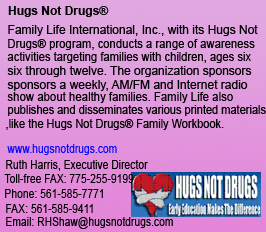
<style>
.page{position:relative;width:266px;height:232px}
.page>*{position:absolute;margin:0}
.t1{font:12px "Arial-BoldMT";color:#000000}
.t2{font:12px "ArialMT";color:#000000}
.t3{font:12px "ArialMT";color:#000000;scale:0.94 1}
.t4{font:12px "ArialMT";color:#000000;scale:0.93 1}
.t5{font:12px "ArialMT";color:#000000;scale:0.95 1}
.t6{font:12px "ArialMT";color:#000000;scale:0.92 1}
.t7{font:12px "ArialMT";color:#0b0bf9;scale:0.86 1}
.t8{font:12px "ArialMT";color:#000000;scale:0.86 1}
</style>
<div class="page">
<p class="t1" style="left:8px;top:6px;width:101px;height:11px">Hugs Not Drugs®</p>
<p class="t2" style="left:8px;top:25px;width:250px;height:11px">Family Life International, Inc., with its Hugs Not</p>
<p class="t3" style="left:8px;top:39px;width:247px;height:11px">Drugs® program, conducts a range of awareness</p>
<p class="t4" style="left:7px;top:52px;width:244px;height:11px">activities targeting families with children, ages six</p>
<p class="t2" style="left:7px;top:66px;width:245px;height:11px">six through twelve. The organization sponsors</p>
<p class="t2" style="left:7px;top:80px;width:241px;height:11px">sponsors a weekly, AM/FM and Internet radio</p>
<p class="t5" style="left:7px;top:92px;width:226px;height:11px">show about healthy families. Family Life also</p>
<p class="t6" style="left:8px;top:105px;width:258px;height:11px">publishes and disseminates various printed materials</p>
<p class="t6" style="left:6px;top:119px;width:218px;height:11px">,like the Hugs Not Drugs® Family Workbook.</p>
<p class="t7" style="left:7px;top:144px;width:110px;height:11px">www.hugsnotdrugs.com</p>
<p class="t8" style="left:6px;top:160px;width:142px;height:11px">Ruth Harris, Executive Director</p>
<p class="t8" style="left:4px;top:174px;width:130px;height:9px">Toll-free FAX: 775-255-9199</p>
<p class="t8" style="left:5px;top:189px;width:98px;height:9px">Phone: 561-585-7771</p>
<p class="t8" style="left:6px;top:204px;width:87px;height:9px">FAX: 561-585-9411</p>
<p class="t8" style="left:6px;top:217px;width:167px;height:12px">Email: RHShaw@hugsnotdrugs.com</p>
</div>
